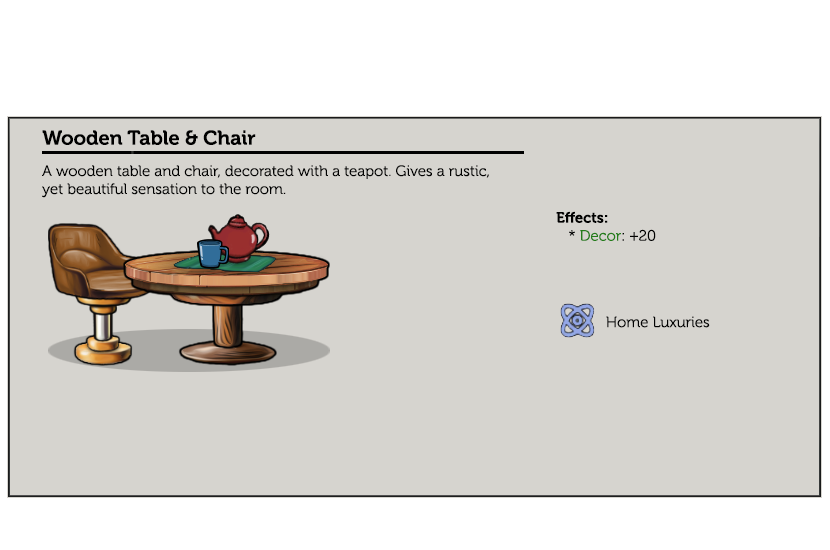
<style>
.page{position:relative;width:830px;height:550px;background:#d6d4cf}
.page>*{position:absolute;margin:0}
.t1{font:20px "Museo-700";color:#000000}
.t2{font:15px "Museo-300";color:#000000}
.t3{font:15px "Museo-700";color:#000000}
.t4{font:15px "Museo-300";color:#247d1a}
.t5{font:15px "Museo-300";color:#020202}
</style>
<div class="page">
<p class="t1" style="left:42px;top:130px;width:214px;height:15px">Wooden Table &amp; Chair</p>
<p class="t2" style="left:42px;top:165px;width:447px;height:33px">A wooden table and chair, decorated with a teapot. Gives a rustic, yet beautiful sensation to the room.</p>
<p class="t3" style="left:556px;top:211px;width:100px;height:30px">Effects:<br><span class="t2">   * </span><span class="t4">Decor</span><span class="t2">: +20</span></p>
<p class="t5" style="left:606px;top:316px;width:104px;height:12px">Home Luxuries</p>
</div>
